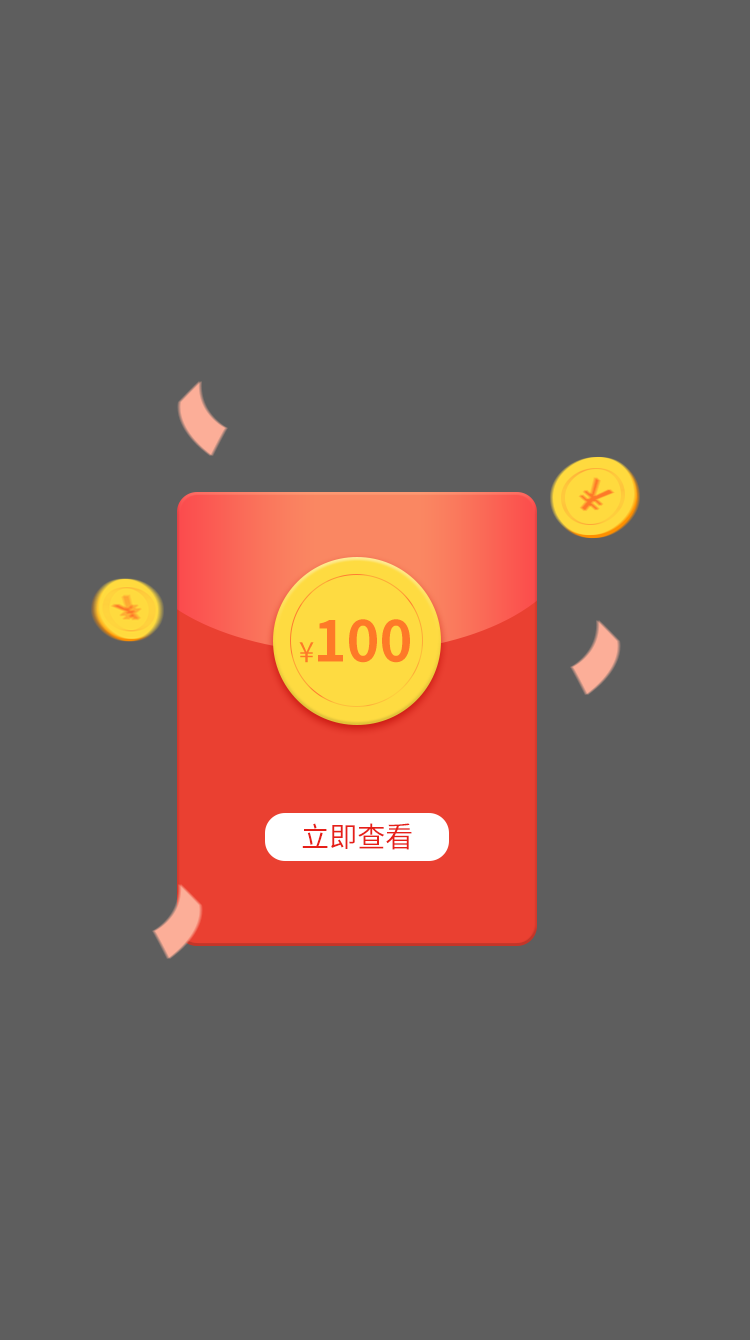
<style>
.page{position:relative;width:750px;height:1340px;background:#5e5e5e}
.page>*{position:absolute;margin:0}
.t1{font:56px "SourceHanSansCN-Bold";color:#fe7928;text-transform:uppercase}
.t2{font:28px "SourceHanSansCN-Regular";color:#fe7928;text-transform:uppercase}
.t3{font:28px "SourceHanSansCN-Regular";color:#e61f18;text-transform:uppercase}
</style>
<div class="page">
<p class="t1" style="left:318px;top:619px;width:92px;height:44px">100</p>
<p class="t2" style="left:299px;top:642px;width:15px;height:21px">¥</p>
<p class="t3" style="left:302px;top:823px;width:110px;height:27px">立即查看</p>
</div>
